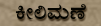
<style>
.page{position:relative;width:101px;height:26px}
.page>*{position:absolute;margin:0}
.t1{font:25px "Kuvempu_Eng_0001";color:#040400}
</style>
<div class="page">
<p class="t1" style="left:16px;top:4px;width:70px;height:15px">QÃ°ªÀÄuÉ</p>
</div>
